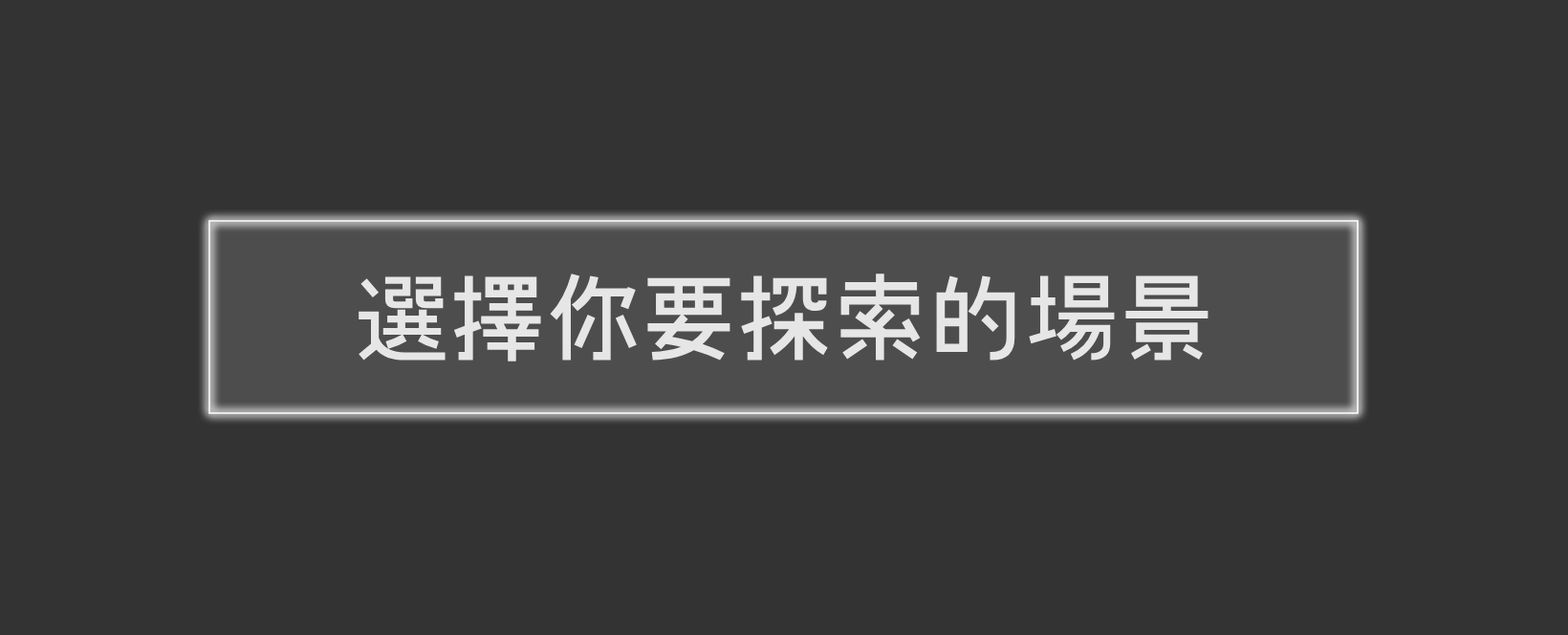
<style>
.page{position:relative;width:1568px;height:635px;background:#333333}
.page>*{position:absolute;margin:0}
.t1{font:95.6px "Konatu-Tohaba";color:#e6e6e6}
</style>
<div class="page">
<p class="t1" style="left:359px;top:273px;width:850px;height:88px">選擇你要探索的場景</p>
</div>
